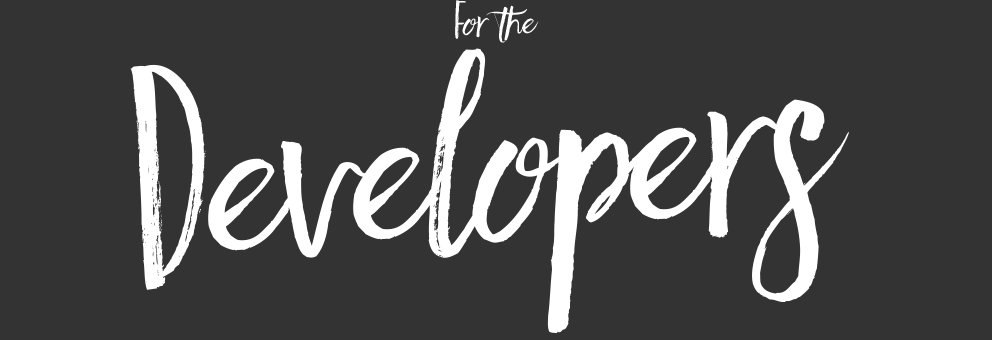
<style>
.page{position:relative;width:992px;height:340px;background:#333333}
.page>*{position:absolute;margin:0}
.t1{font:36px "FaithAndGloryOne";color:#ffffff}
.t2{font:36px "FaithAndGloryTwo";color:#ffffff}
.t3{font:220px "FaithAndGloryOne";color:#ffffff}
.t4{font:220px "FaithAndGloryTwo";color:#ffffff}
</style>
<div class="page">
<p class="t1" style="left:455px;top:0px;width:84px;height:43px"><span class="t2">F</span>or the</p>
<p class="t3" style="left:130px;top:48px;width:720px;height:286px;rotate:-4deg"><span class="t4">D</span>evelopers</p>
</div>
